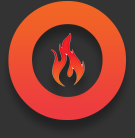
<style>
.page{position:relative;width:135px;height:138px;background:#333333}
.page>*{position:absolute;margin:0}
.t1{font:160.8px "AvantGardeITCbyBT-Demi";letter-spacing:0.04em;color:#ef5032}
</style>
<div class="page">
<p class="t1" style="left:8px;top:1px;width:118px;height:119px">O</p>
</div>
